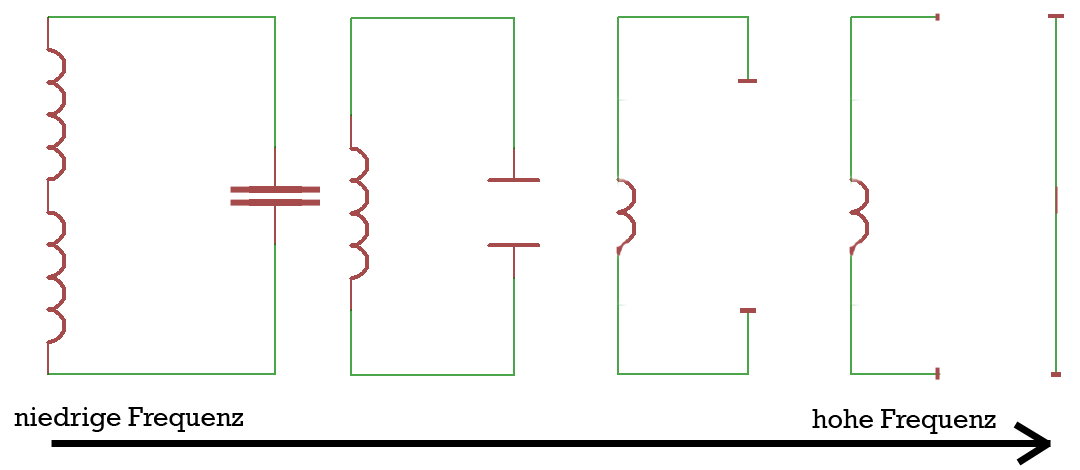
<style>
.page{position:relative;width:1080px;height:470px;background:#ffffff}
.page>*{position:absolute;margin:0}
.t1{font:27.1px "Rockwell";letter-spacing:-0.001em;color:#000000}
</style>
<div class="page">
<p class="t1" style="left:14px;top:407px;width:229px;height:25px">niedrige Frequenz</p>
<p class="t1" style="left:812px;top:409px;width:184px;height:25px">hohe Frequenz</p>
</div>
